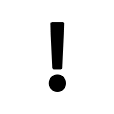
<style>
.page{position:relative;width:114px;height:114px;background:#ffffff}
.page>*{position:absolute;margin:0}
.t1{font:99.7px "SourceSansPro-Semibold";color:#000000}
</style>
<div class="page">
<p class="t1" style="left:49px;top:23px;width:16px;height:68px">!</p>
</div>
